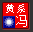
<style>
.page{position:relative;width:33px;height:32px;background:#f20000}
.page>*{position:absolute;margin:0}
.t1{font:10.4px "SimSun";color:#ffffff}
.t2{font:11.7px "SimSun";color:#ffffff}
</style>
<div class="page">
<p class="t1" style="left:6px;top:4px;width:19px;height:9px">黄系</p>
<p class="t2" style="left:16px;top:15px;width:11px;height:12px">冯</p>
</div>
